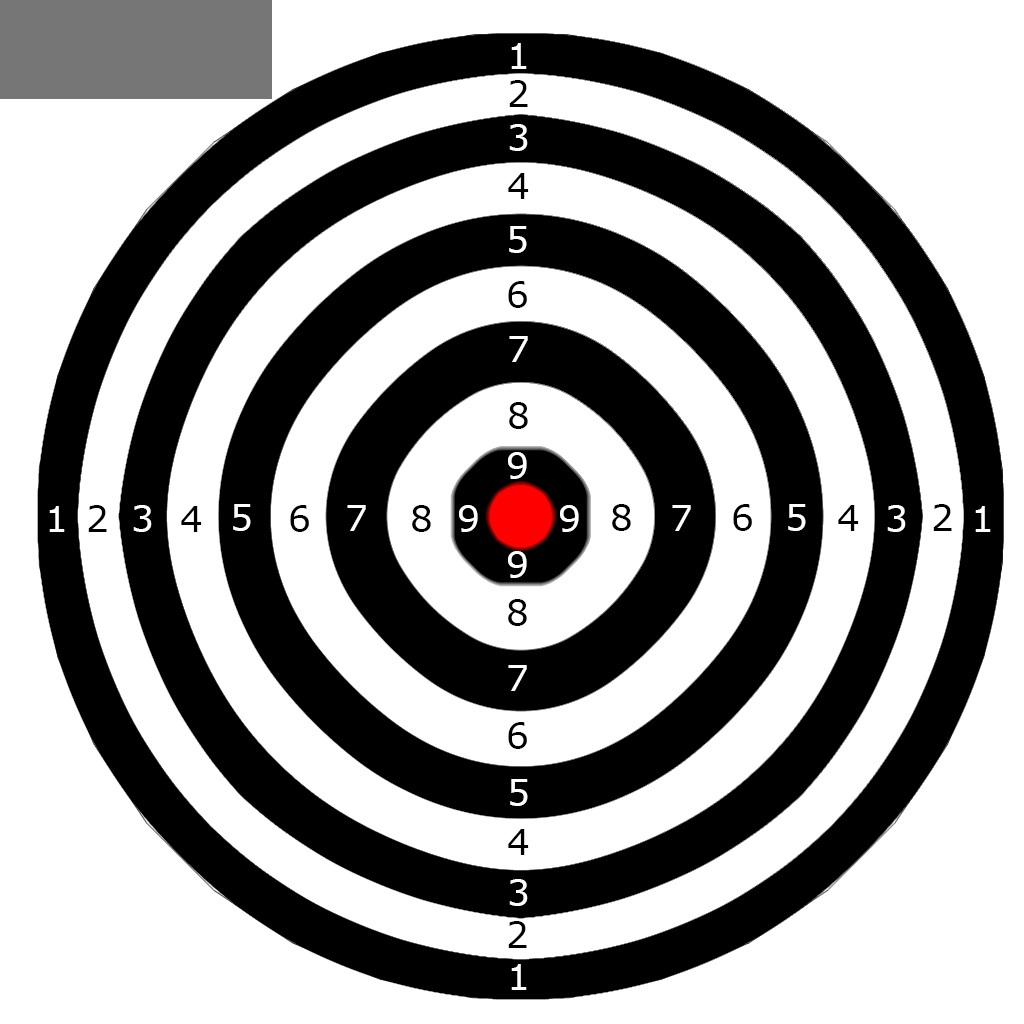
<style>
.page{position:relative;width:1024px;height:1024px;background:#ffffff}
.page>*{position:absolute;margin:0}
.t1{font:36px "MSReferenceSansSerif";color:#ffffff}
.t2{font:36px "MSReferenceSansSerif";color:#000000}
.t3{font:36px "MSReferenceSansSerif";color:#010000}
</style>
<div class="page">
<p class="t1" style="left:511px;top:43px;width:16px;height:26px">1</p>
<p class="t2" style="left:509px;top:80px;width:19px;height:27px">2</p>
<p class="t1" style="left:509px;top:124px;width:19px;height:27px">3</p>
<p class="t2" style="left:508px;top:173px;width:21px;height:26px">4</p>
<p class="t1" style="left:509px;top:226px;width:18px;height:27px">5</p>
<p class="t2" style="left:508px;top:281px;width:19px;height:27px">6</p>
<p class="t1" style="left:509px;top:336px;width:19px;height:26px">7</p>
<p class="t3" style="left:509px;top:402px;width:19px;height:27px">8</p>
<p class="t1" style="left:508px;top:452px;width:19px;height:27px">9</p>
<p class="t1" style="left:49px;top:506px;width:16px;height:26px">1</p>
<p class="t2" style="left:88px;top:505px;width:19px;height:27px">2</p>
<p class="t1" style="left:133px;top:505px;width:19px;height:27px">3</p>
<p class="t2" style="left:181px;top:506px;width:21px;height:26px">4</p>
<p class="t1" style="left:233px;top:504px;width:18px;height:27px">5</p>
<p class="t2" style="left:290px;top:505px;width:19px;height:27px">6</p>
<p class="t1" style="left:347px;top:505px;width:19px;height:26px">7</p>
<p class="t2" style="left:412px;top:505px;width:19px;height:27px">8</p>
<p class="t1" style="left:459px;top:505px;width:19px;height:27px">9</p>
<p class="t1" style="left:560px;top:505px;width:19px;height:27px">9</p>
<p class="t2" style="left:612px;top:504px;width:19px;height:27px">8</p>
<p class="t1" style="left:672px;top:505px;width:19px;height:26px">7</p>
<p class="t2" style="left:733px;top:504px;width:19px;height:27px">6</p>
<p class="t1" style="left:788px;top:504px;width:18px;height:27px">5</p>
<p class="t2" style="left:838px;top:505px;width:21px;height:26px">4</p>
<p class="t1" style="left:887px;top:505px;width:19px;height:27px">3</p>
<p class="t2" style="left:933px;top:504px;width:19px;height:27px">2</p>
<p class="t1" style="left:975px;top:506px;width:16px;height:26px">1</p>
<p class="t1" style="left:508px;top:551px;width:19px;height:27px">9</p>
<p class="t2" style="left:508px;top:599px;width:19px;height:27px">8</p>
<p class="t1" style="left:508px;top:665px;width:19px;height:26px">7</p>
<p class="t2" style="left:508px;top:722px;width:19px;height:27px">6</p>
<p class="t1" style="left:510px;top:779px;width:18px;height:27px">5</p>
<p class="t2" style="left:508px;top:829px;width:21px;height:26px">4</p>
<p class="t1" style="left:509px;top:879px;width:19px;height:27px">3</p>
<p class="t2" style="left:508px;top:921px;width:19px;height:27px">2</p>
<p class="t1" style="left:511px;top:964px;width:16px;height:26px">1</p>
</div>
